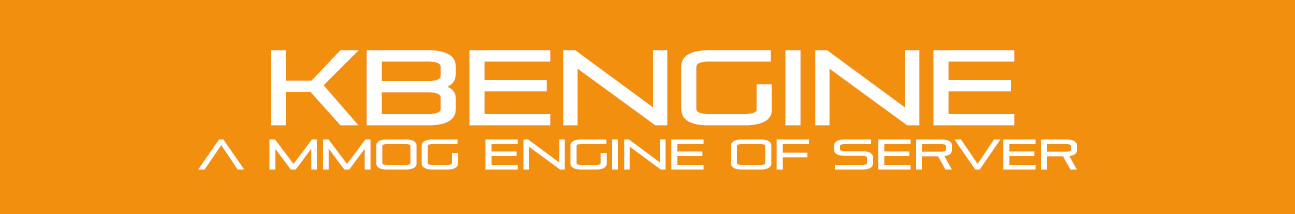
<style>
.page{position:relative;width:1295px;height:214px;background:#f28f0e}
.page>*{position:absolute;margin:0}
.t1{font:106px "Pirulen";color:#ffffff;scale:1.05 1}
.t2{font:42.4px "Pirulen";color:#ffffff;scale:1.05 1}
</style>
<div class="page">
<p class="t1" style="left:271px;top:50px;width:744px;height:76px">KBEngine</p>
<p class="t2" style="left:198px;top:139px;width:879px;height:31px">A MMOG engine of server</p>
</div>
